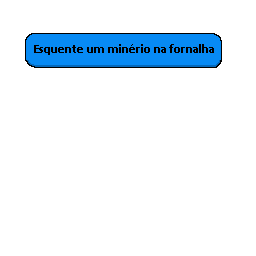
<style>
.page{position:relative;width:256px;height:256px;background:#ffffff}
.page>*{position:absolute;margin:0}
.t1{font:12.5px "Calibri-Bold";color:#000000}
</style>
<div class="page">
<p class="t1" style="left:34px;top:44px;width:180px;height:11px">Esquente um minério na fornalha</p>
</div>
